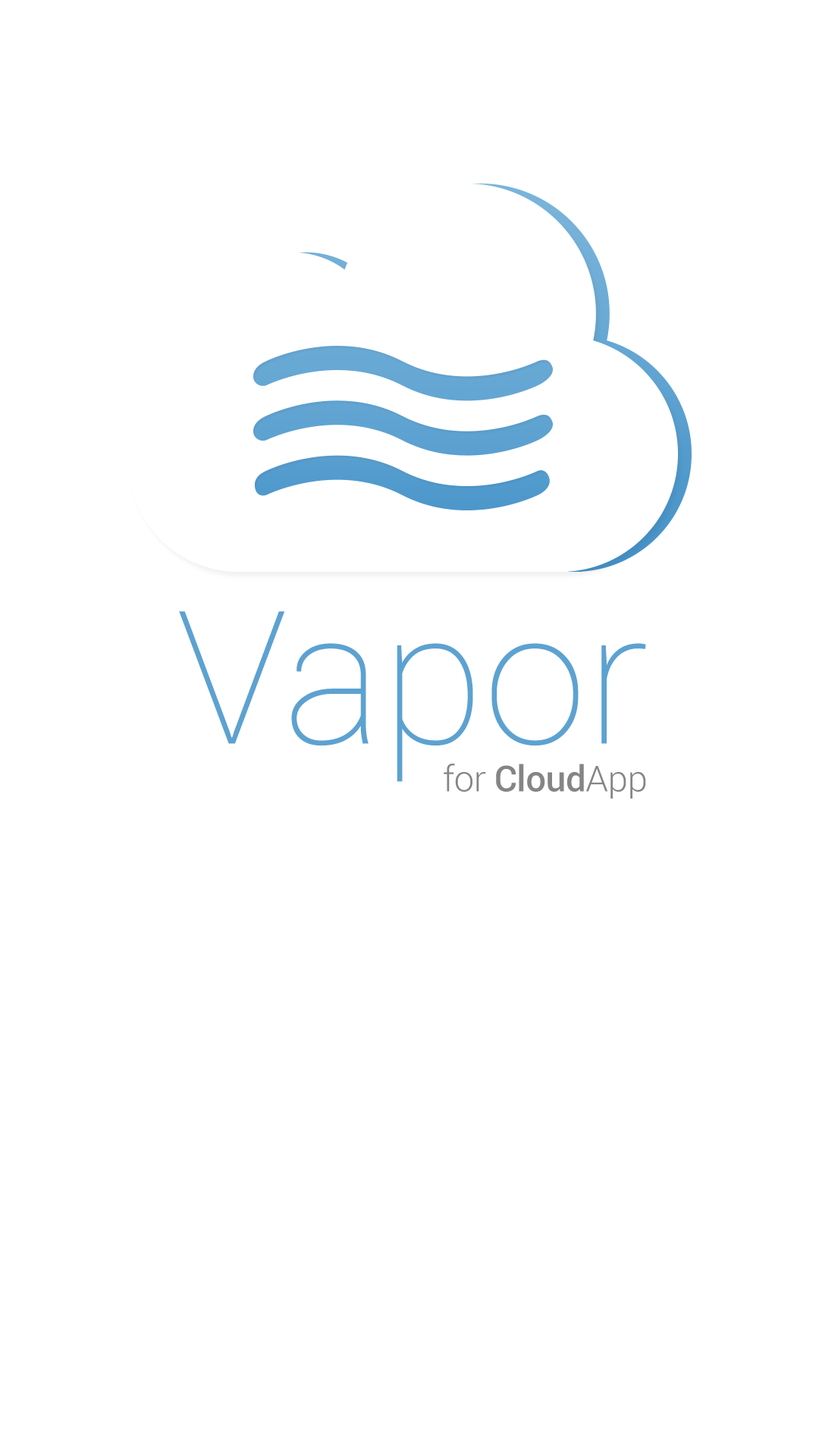
<style>
.page{position:relative;width:819px;height:1456px;background:#ffffff}
.page>*{position:absolute;margin:0}
.t1{font:185.8px "Roboto-Thin";color:#5ca2d1}
.t2{font:35.8px "Roboto-Medium";letter-spacing:-0.01em;color:#858585}
.t3{font:35.8px "Roboto-Light";letter-spacing:-0.01em;color:#858585}
</style>
<div class="page">
<p class="t1" style="left:179px;top:611px;width:467px;height:171px">Vapor</p>
<p class="t2" style="left:444px;top:764px;width:202px;height:35px"><span class="t3">for</span> Cloud<span class="t3">App</span></p>
</div>
